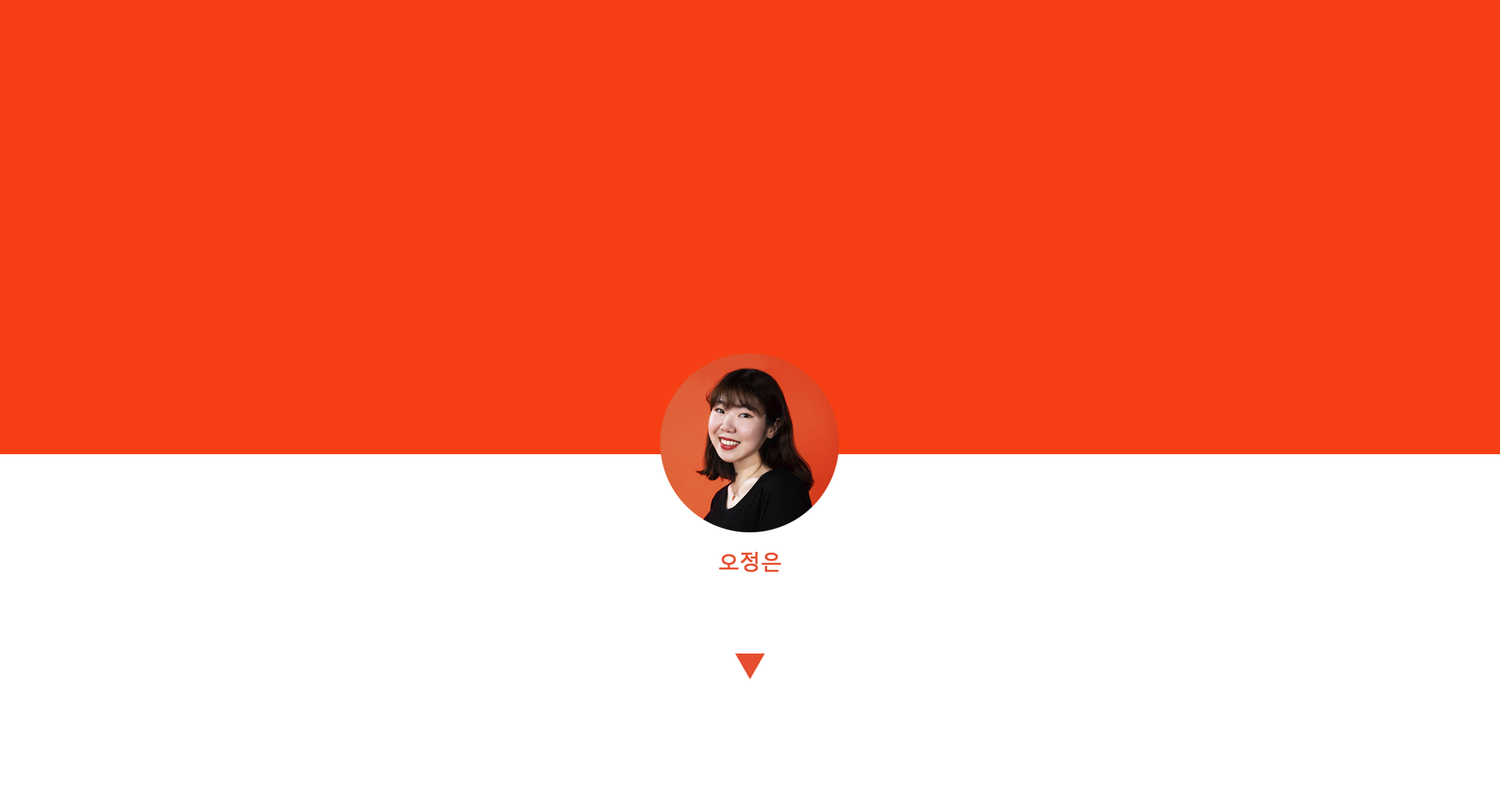
<style>
.page{position:relative;width:1500px;height:795px;background:#f63f14}
.page>*{position:absolute;margin:0}
.t1{font:20.8px "MalgunGothic";color:#e54e2f;font-weight:bold}
</style>
<div class="page">
<p class="t1" style="left:719px;top:552px;width:62px;height:20px">오정은</p>
</div>
